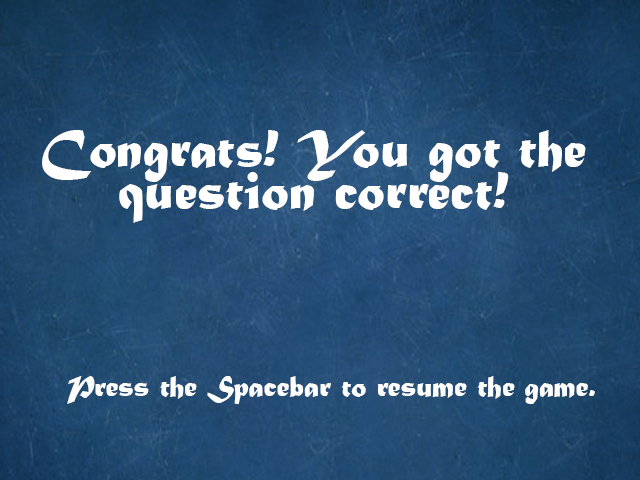
<style>
.page{position:relative;width:640px;height:480px}
.page>*{position:absolute;margin:0}
.t1{font:55.6px/41.7px "MaturaMTScriptCapitals";color:#ffffff}
.t2{font:30.6px "MaturaMTScriptCapitals";color:#ffffff}
</style>
<div class="page">
<p class="t1" style="left:42px;top:130px;width:544px;height:93px;text-align:center">Congrats! You got the<br>question correct!</p>
<p class="t2" style="left:67px;top:376px;width:528px;height:28px">Press the Spacebar to resume the game.</p>
</div>
